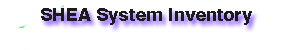
<style>
.page{position:relative;width:300px;height:50px;background:#ffffff}
.page>*{position:absolute;margin:0}
.t1{font:18px "Swiss721BT-Heavy";color:#151313}
</style>
<div class="page">
<p class="t1" style="left:41px;top:8px;width:211px;height:17px;opacity:0.97">SHEA System Inventory</p>
</div>
